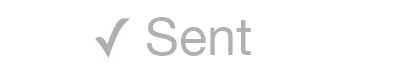
<style>
.page{position:relative;width:398px;height:77px;background:#ffffff}
.page>*{position:absolute;margin:0}
.t1{font:52.1px "HelveticaNeue";color:#b1b1b1}
</style>
<div class="page">
<p class="t1" style="left:146px;top:17px;width:105px;height:39px">Sent</p>
</div>
